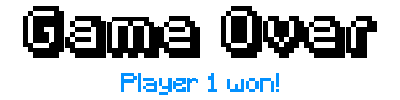
<style>
.page{position:relative;width:400px;height:100px;background:#ffffff}
.page>*{position:absolute;margin:0}
.t1{font:41.7px "Fipps-Regular";color:#000000}
.t2{font:25px "Minecraft";color:#0391ff}
</style>
<div class="page">
<p class="t1" style="left:23px;top:6px;width:354px;height:52px">Game Over</p>
<p class="t2" style="left:121px;top:73px;width:158px;height:22px">Player 1 won!</p>
</div>
